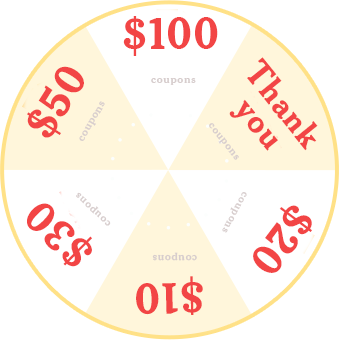
<style>
.page{position:relative;width:340px;height:340px;background:#ffffff}
.page>*{position:absolute;margin:0}
.t1{font:44px "NYTCheltenham-ExtraBold";letter-spacing:0.06em;color:#f24545}
.t2{font:34px/30px "NYTCheltenham-ExtraBold";letter-spacing:0.04em;color:#f24545}
.t3{font:12px "NYTCheltenham-Bold";letter-spacing:0.06em;color:#d7cdcd}
</style>
<div class="page">
<p class="t1" style="left:123px;top:16px;width:95px;height:40px">$100</p>
<p class="t2" style="left:229px;top:57px;width:89px;height:94px;text-align:center;rotate:51deg">Thank<br>you</p>
<p class="t1" style="left:27px;top:66px;width:57px;height:72px;rotate:-58deg">$50</p>
<p class="t3" style="left:151px;top:78px;width:45px;height:7px">coupons</p>
<p class="t3" style="left:79px;top:101px;width:26px;height:40px;rotate:-60deg">coupons</p>
<p class="t3" style="left:209px;top:123px;width:30px;height:37px;rotate:52deg">coupons</p>
<p class="t3" style="left:76px;top:192px;width:35px;height:34px;rotate:-137deg">coupons</p>
<p class="t3" style="left:222px;top:192px;width:25px;height:41px;rotate:118deg">coupons</p>
<p class="t1" style="left:27px;top:203px;width:65px;height:64px;rotate:-135deg">$30</p>
<p class="t1" style="left:253px;top:205px;width:59px;height:68px;rotate:127deg">$20</p>
<p class="t3" style="left:152px;top:252px;width:45px;height:9px;rotate:-180deg">coupons</p>
<p class="t1" style="left:136px;top:276px;width:67px;height:39px;rotate:179deg">$10</p>
</div>
